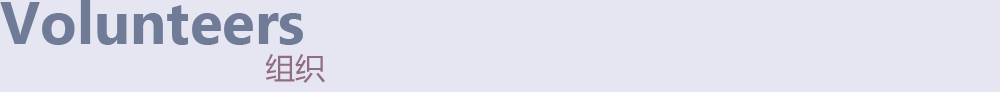
<style>
.page{position:relative;width:1000px;height:92px;background:#e6e6f2}
.page>*{position:absolute;margin:0}
.t1{font:60px "SegoeUI-Bold";color:#707b98}
.t2{font:30px "MicrosoftYaHei";color:#926c82}
</style>
<div class="page">
<p class="t1" style="left:0px;top:0px;width:303px;height:45px">Volunteers</p>
<p class="t2" style="left:265px;top:54px;width:60px;height:29px">组织</p>
</div>
